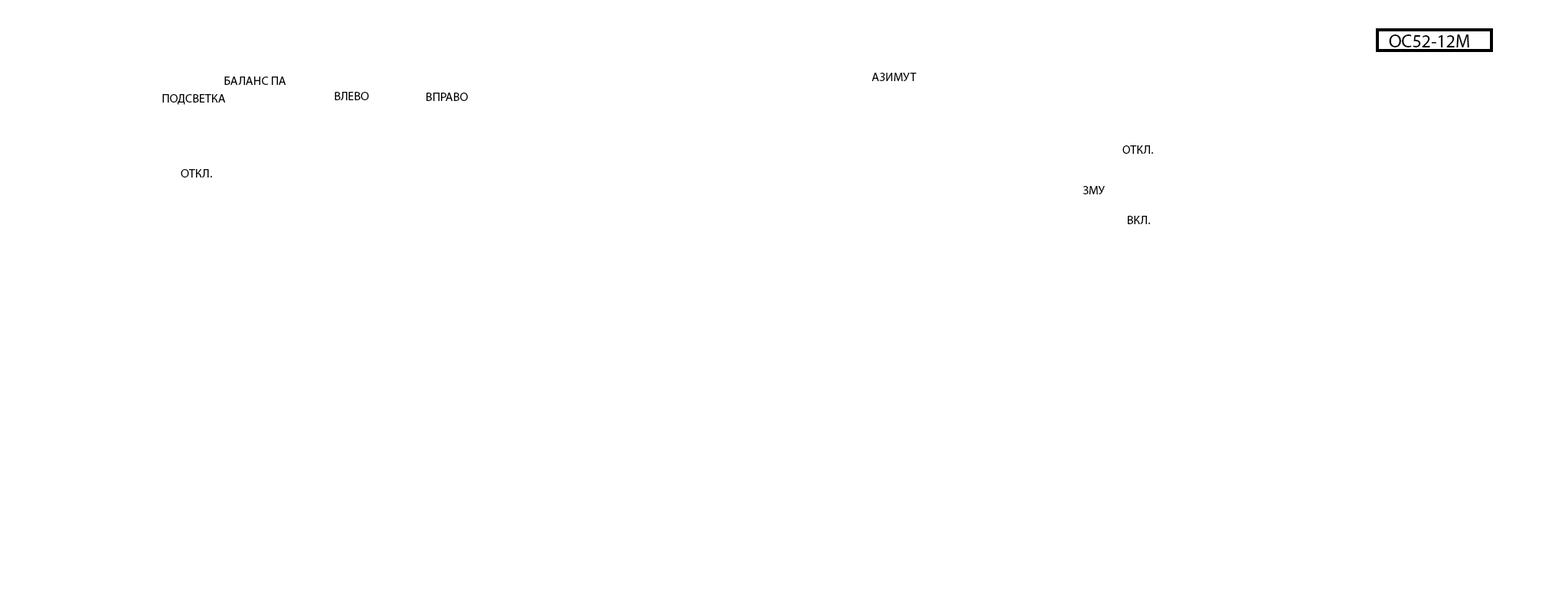
<style>
.page{position:relative;width:1568px;height:593px;background:#ffffff}
.page>*{position:absolute;margin:0}
.t1{font:18.4px "MyriadPro-Regular";color:#000000}
.t2{font:12.2px "MyriadPro-Regular";color:#000000}
</style>
<div class="page">
<p class="t1" style="left:1389px;top:34px;width:80px;height:13px">ОС52-12М</p>
<p class="t2" style="left:224px;top:77px;width:62px;height:8px">БАЛАНС ПА</p>
<p class="t2" style="left:871px;top:73px;width:45px;height:8px">АЗИМУТ</p>
<p class="t2" style="left:162px;top:94px;width:64px;height:11px">ПОДСВЕТКА</p>
<p class="t2" style="left:335px;top:92px;width:34px;height:8px">ВЛЕВО</p>
<p class="t2" style="left:426px;top:93px;width:42px;height:8px">ВПРАВО</p>
<p class="t2" style="left:1122px;top:145px;width:32px;height:9px">ОТКЛ.</p>
<p class="t2" style="left:181px;top:169px;width:31px;height:9px">ОТКЛ.</p>
<p class="t2" style="left:1083px;top:186px;width:22px;height:8px">ЗМУ</p>
<p class="t2" style="left:1128px;top:216px;width:23px;height:8px">ВКЛ.</p>
</div>
